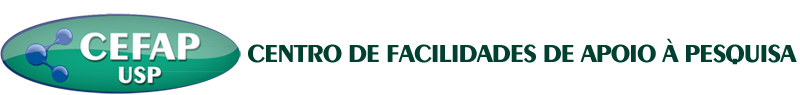
<style>
.page{position:relative;width:800px;height:95px;background:#ffffff}
.page>*{position:absolute;margin:0}
.t1{font:26px "Exotic350BT-Bold";letter-spacing:-0.05em;color:#013f31;text-transform:uppercase}
</style>
<div class="page">
<p class="t1" style="left:248px;top:38px;width:549px;height:27px">Centro de Facilidades de Apoio à Pesquisa</p>
</div>
